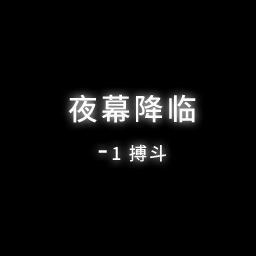
<style>
.page{position:relative;width:256px;height:256px;background:#000000}
.page>*{position:absolute;margin:0}
.t1{font:30px/40px "SourceHanSansSC-Medium";letter-spacing:0.1em;color:#ffffff}
.t2{font:18px/40px "SourceHanSansSC-Medium";letter-spacing:0.1em;color:#ffffff}
</style>
<div class="page">
<p class="t1" style="left:68px;top:94px;width:128px;height:68px;text-align:center">夜幕降临<br>-<span class="t2">1 搏斗</span></p>
</div>
